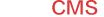
<style>
.page{position:relative;width:104px;height:17px;background:#ffffff}
.page>*{position:absolute;margin:0}
.t1{font:18px "FZLTZHK--GBK1-0";color:#dd3737}
</style>
<div class="page">
<p class="t1" style="left:52px;top:0px;width:46px;height:15px">CMS</p>
</div>
